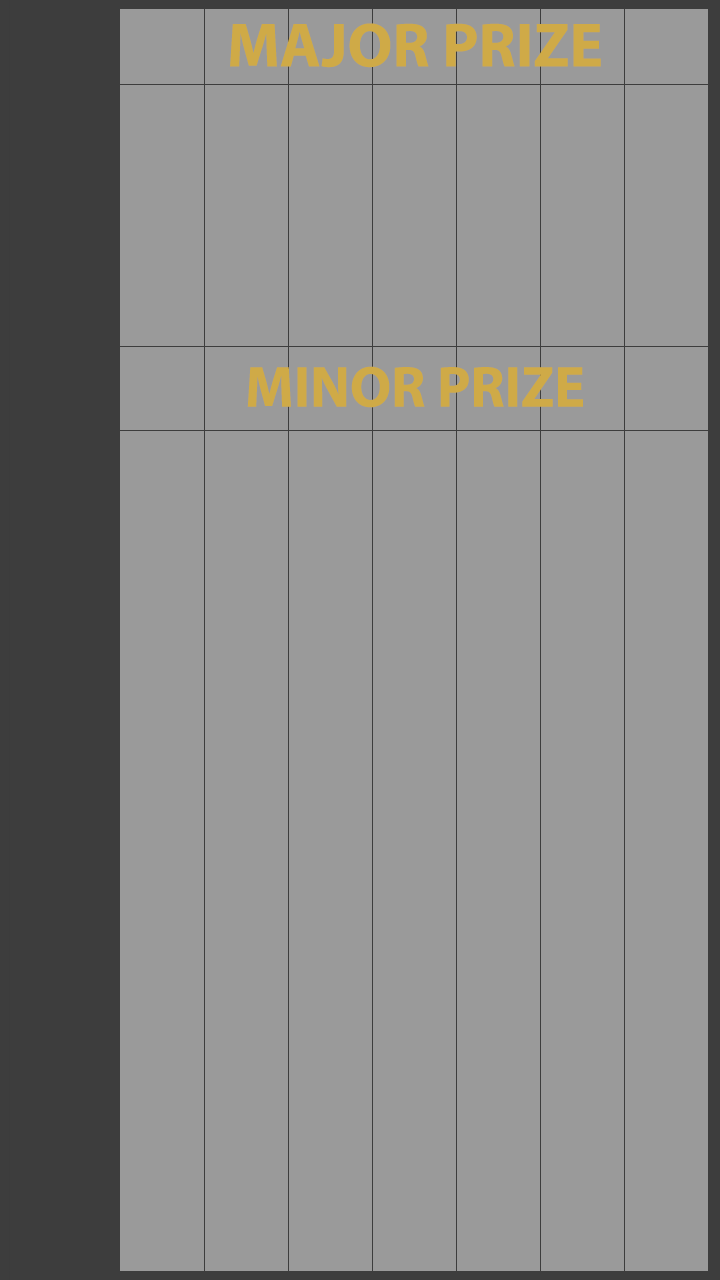
<style>
.page{position:relative;width:720px;height:1280px;background:#9a9a9a}
.page>*{position:absolute;margin:0}
.t1{font:15px "MyriadPro-Bold";color:#cfaa47}
.t2{font:13.9px "MyriadPro-Bold";color:#cfaa47}
</style>
<div class="page">
<p class="t1" style="left:230px;top:23px;width:371px;height:45px">MAJOR PRIZE</p>
<p class="t2" style="left:247px;top:366px;width:336px;height:42px">MINOR PRIZE</p>
</div>
